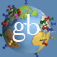
<style>
.page{position:relative;width:57px;height:57px;background:#5e87b0}
.page>*{position:absolute;margin:0}
.t1{font:30px "Cochin";color:#f5f7f9}
</style>
<div class="page">
<p class="t1" style="left:25px;top:14px;width:15px;height:21px">b</p>
<p class="t1" style="left:12px;top:22px;width:15px;height:20px">g</p>
</div>
